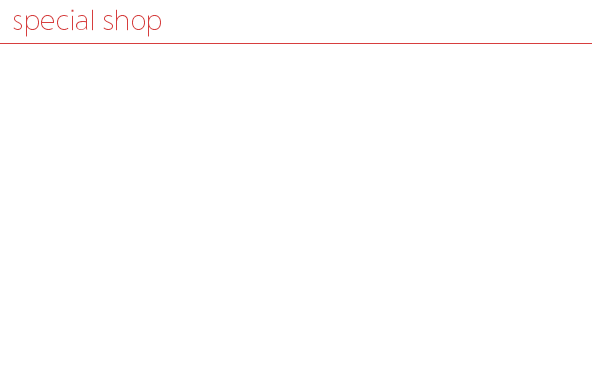
<style>
.page{position:relative;width:592px;height:389px;background:#ffffff}
.page>*{position:absolute;margin:0}
.t1{font:28px "YoonGothicPro710";color:#d73e3e}
</style>
<div class="page">
<p class="t1" style="left:13px;top:9px;width:148px;height:28px">special shop</p>
</div>
